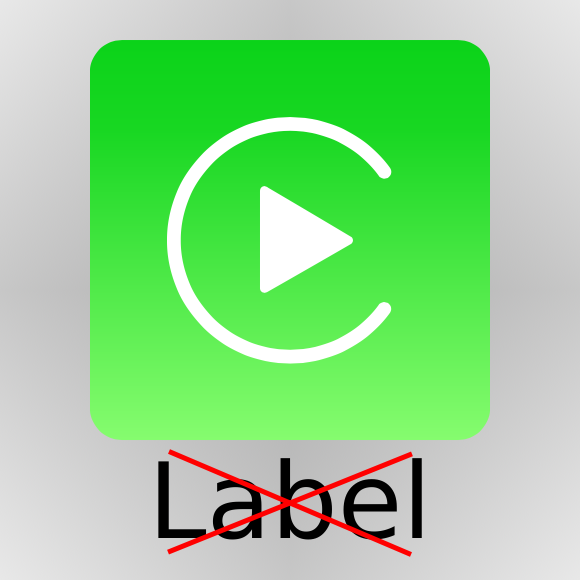
<style>
.page{position:relative;width:580px;height:580px}
.page>*{position:absolute;margin:0}
.t1{font:105.1px "DejaVuSans";color:#000000}
</style>
<div class="page">
<p class="t1" style="left:158px;top:458px;width:264px;height:82px">Label</p>
</div>
